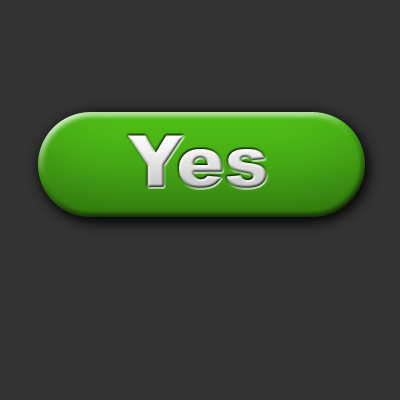
<style>
.page{position:relative;width:400px;height:400px;background:#333333}
.page>*{position:absolute;margin:0}
.t1{font:72px "Arial-Black"}
</style>
<div class="page">
<p class="t1" style="left:127px;top:135px;width:140px;height:53px">Yes</p>
</div>
